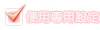
<style>
.page{position:relative;width:100px;height:30px;background:#ffffff}
.page>*{position:absolute;margin:0}
.t1{font:12px "AdobeFanHeitiStd-Bold";color:#fff1f2;font-weight:bold}
</style>
<div class="page">
<p class="t1" style="left:26px;top:11px;width:74px;height:12px">便用專用設定</p>
</div>
